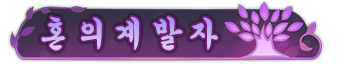
<style>
.page{position:relative;width:338px;height:65px;background:#ffffff}
.page>*{position:absolute;margin:0}
.t1{font:35px "MGungHeulim";letter-spacing:0.04em;color:#bfb1f2;font-weight:bold}
</style>
<div class="page">
<p class="t1" style="left:41px;top:16px;width:177px;height:35px">혼의계발자</p>
</div>
